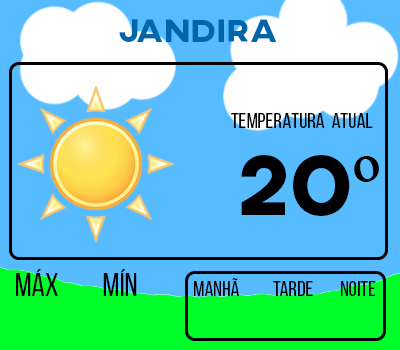
<style>
.page{position:relative;width:400px;height:350px;background:#57bbff}
.page>*{position:absolute;margin:0}
.t1{font:33px "AXIS-ExtraBold";color:#0165aa}
.t2{font:21.4px "BebasNeue-Regular";color:#000000}
.t3{font:86.5px "AXIS-ExtraBold";color:#000000}
.t4{font:86.5px "TimesNewRomanPSMT";color:#000000}
.t5{font:32.1px "BebasNeue-Regular";color:#000000}
</style>
<div class="page">
<p class="t1" style="left:119px;top:19px;width:158px;height:23px">JANDIRA</p>
<p class="t2" style="left:231px;top:113px;width:142px;height:15px">TEMPERATURA  ATUAL</p>
<p class="t3" style="left:241px;top:155px;width:138px;height:61px">20<span class="t4">º</span></p>
<p class="t5" style="left:16px;top:269px;width:42px;height:27px">MÁX</p>
<p class="t5" style="left:103px;top:269px;width:34px;height:27px">MÍN</p>
<p class="t2" style="left:194px;top:278px;width:182px;height:18px">MANHÃ   TARDE   NOITE</p>
</div>
